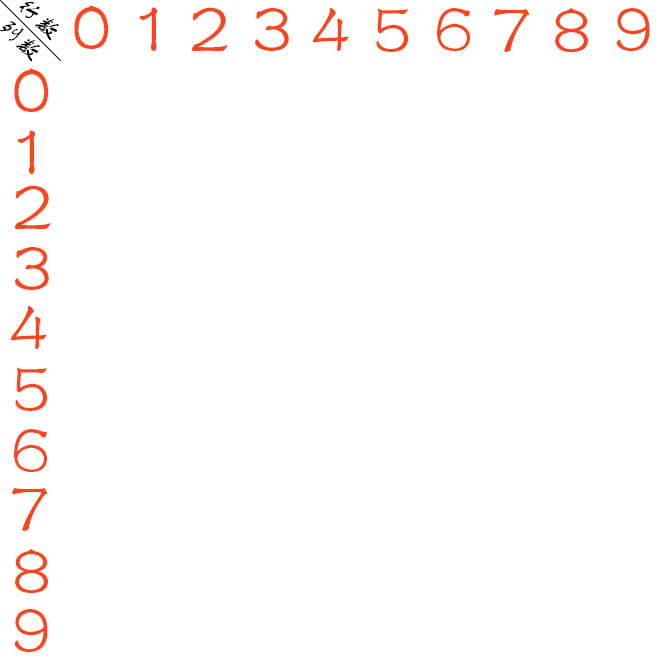
<style>
.page{position:relative;width:660px;height:660px;background:#ffffff}
.page>*{position:absolute;margin:0}
.t1{font:25px "FZSTK--GBK1-0";color:#000000}
.t2{font:79.2px "FZSTK--GBK1-0";color:#f9461e}
</style>
<div class="page">
<p class="t1" style="left:19px;top:1px;width:40px;height:40px;rotate:45deg">行数</p>
<p class="t2" style="left:74px;top:5px;width:35px;height:44px">0</p>
<p class="t2" style="left:139px;top:7px;width:18px;height:44px">1</p>
<p class="t2" style="left:192px;top:7px;width:36px;height:44px">2</p>
<p class="t2" style="left:255px;top:8px;width:34px;height:43px">3</p>
<p class="t2" style="left:313px;top:8px;width:36px;height:43px">4</p>
<p class="t2" style="left:376px;top:8px;width:33px;height:44px">5</p>
<p class="t2" style="left:437px;top:8px;width:34px;height:43px">6</p>
<p class="t2" style="left:494px;top:8px;width:36px;height:44px">7</p>
<p class="t2" style="left:555px;top:8px;width:34px;height:44px">8</p>
<p class="t2" style="left:616px;top:8px;width:34px;height:43px">9</p>
<p class="t1" style="left:0px;top:21px;width:40px;height:41px;rotate:45deg">列数</p>
<p class="t2" style="left:14px;top:68px;width:35px;height:44px">0</p>
<p class="t2" style="left:17px;top:130px;width:18px;height:44px">1</p>
<p class="t2" style="left:15px;top:185px;width:36px;height:44px">2</p>
<p class="t2" style="left:15px;top:247px;width:34px;height:43px">3</p>
<p class="t2" style="left:11px;top:306px;width:36px;height:43px">4</p>
<p class="t2" style="left:15px;top:367px;width:33px;height:44px">5</p>
<p class="t2" style="left:14px;top:429px;width:34px;height:43px">6</p>
<p class="t2" style="left:12px;top:487px;width:36px;height:44px">7</p>
<p class="t2" style="left:15px;top:549px;width:34px;height:44px">8</p>
<p class="t2" style="left:14px;top:609px;width:34px;height:43px">9</p>
</div>
